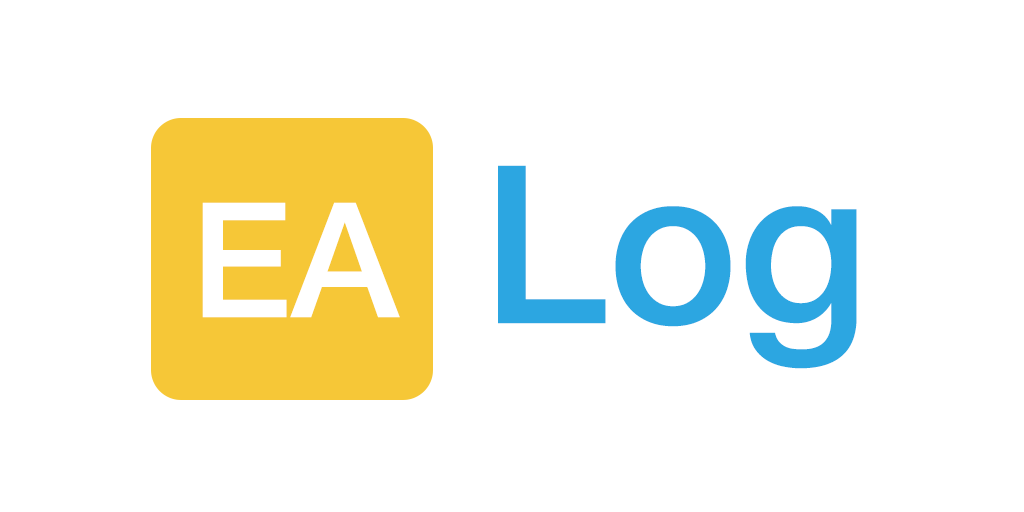
<style>
.page{position:relative;width:1024px;height:512px;background:#ffffff}
.page>*{position:absolute;margin:0}
.t1{font:220px "HelveticaNeue-Medium";color:#2ca6e1}
.t2{font:160px "HelveticaNeue-Medium";color:#ffffff}
</style>
<div class="page">
<p class="t1" style="left:498px;top:165px;width:359px;height:204px">Log</p>
<p class="t2" style="left:202px;top:202px;width:198px;height:116px">EA</p>
</div>
